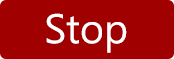
<style>
.page{position:relative;width:174px;height:59px;background:#a10000}
.page>*{position:absolute;margin:0}
.t1{font:38px "MicrosoftJhengHeiUIRegular";color:#ffffff}
</style>
<div class="page">
<p class="t1" style="left:46px;top:13px;width:81px;height:40px">Stop</p>
</div>
